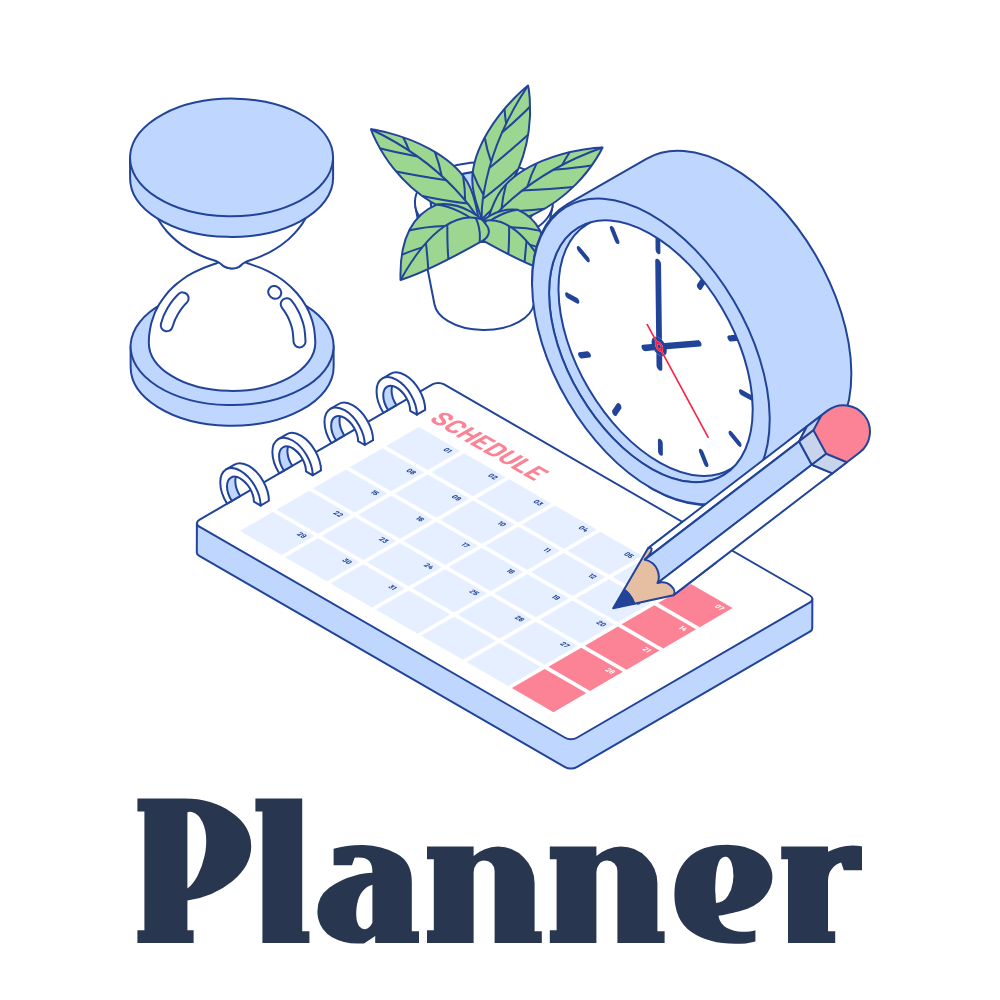
<style>
.page{position:relative;width:1000px;height:1000px;background:#ffffff}
.page>*{position:absolute;margin:0}
.t1{font:200px "EastMarket";color:#283650}
</style>
<div class="page">
<p class="t1" style="left:137px;top:798px;width:726px;height:146px">Planner</p>
</div>
